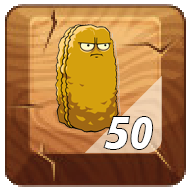
<style>
.page{position:relative;width:192px;height:192px}
.page>*{position:absolute;margin:0}
.t1{font:48px "FuturaBT-ExtraBlackCondItalic";color:#ffffff}
</style>
<div class="page">
<p class="t1" style="left:103px;top:116px;width:51px;height:34px">50</p>
</div>
